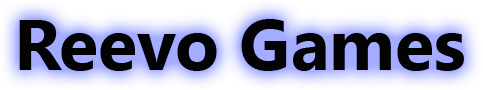
<style>
.page{position:relative;width:483px;height:90px;background:#030303}
.page>*{position:absolute;margin:0}
.t1{font:72px "SegoeUI-Bold";color:#030303}
</style>
<div class="page">
<p class="t1" style="left:19px;top:19px;width:445px;height:52px">Reevo Games</p>
</div>
